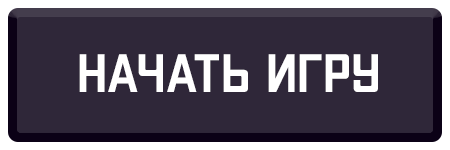
<style>
.page{position:relative;width:450px;height:150px;background:#2f2739}
.page>*{position:absolute;margin:0}
.t1{font:54px "mr_ApexMk3-Medium";color:#ffffff}
</style>
<div class="page">
<p class="t1" style="left:79px;top:54px;width:299px;height:38px">Начать игру</p>
</div>
